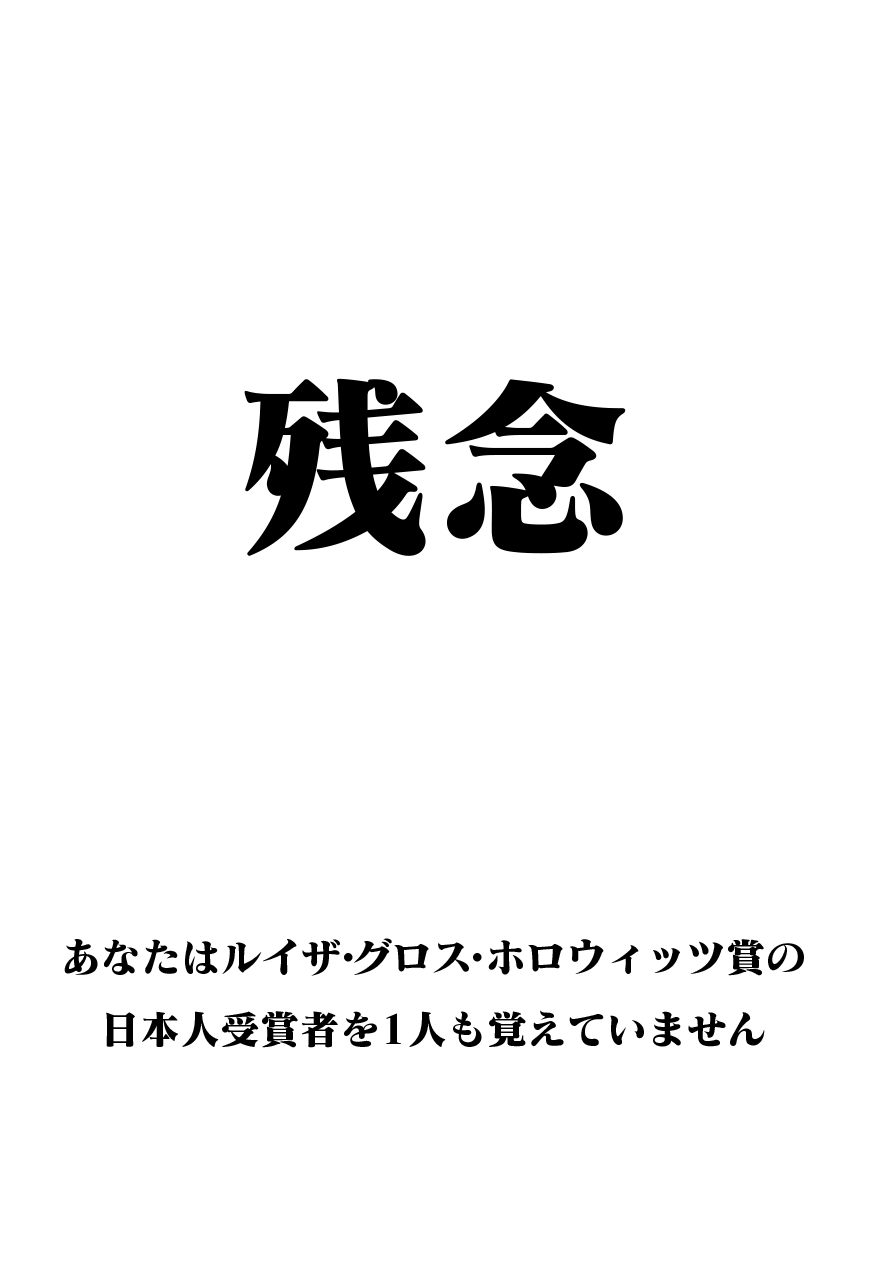
<style>
.page{position:relative;width:870px;height:1283px;background:#ffffff}
.page>*{position:absolute;margin:0}
.t1{font:200px "MatissePro-EB";color:#000000}
.t2{font:40px/72px "MatissePro-EB";color:#000000}
</style>
<div class="page">
<p class="t1" style="left:244px;top:378px;width:382px;height:178px">残念</p>
<p class="t2" style="left:64px;top:938px;width:740px;height:110px;text-align:center">あなたはルイザ・グロス・ホロウィッツ賞の<br>日本人受賞者を1人も覚えていません</p>
</div>
